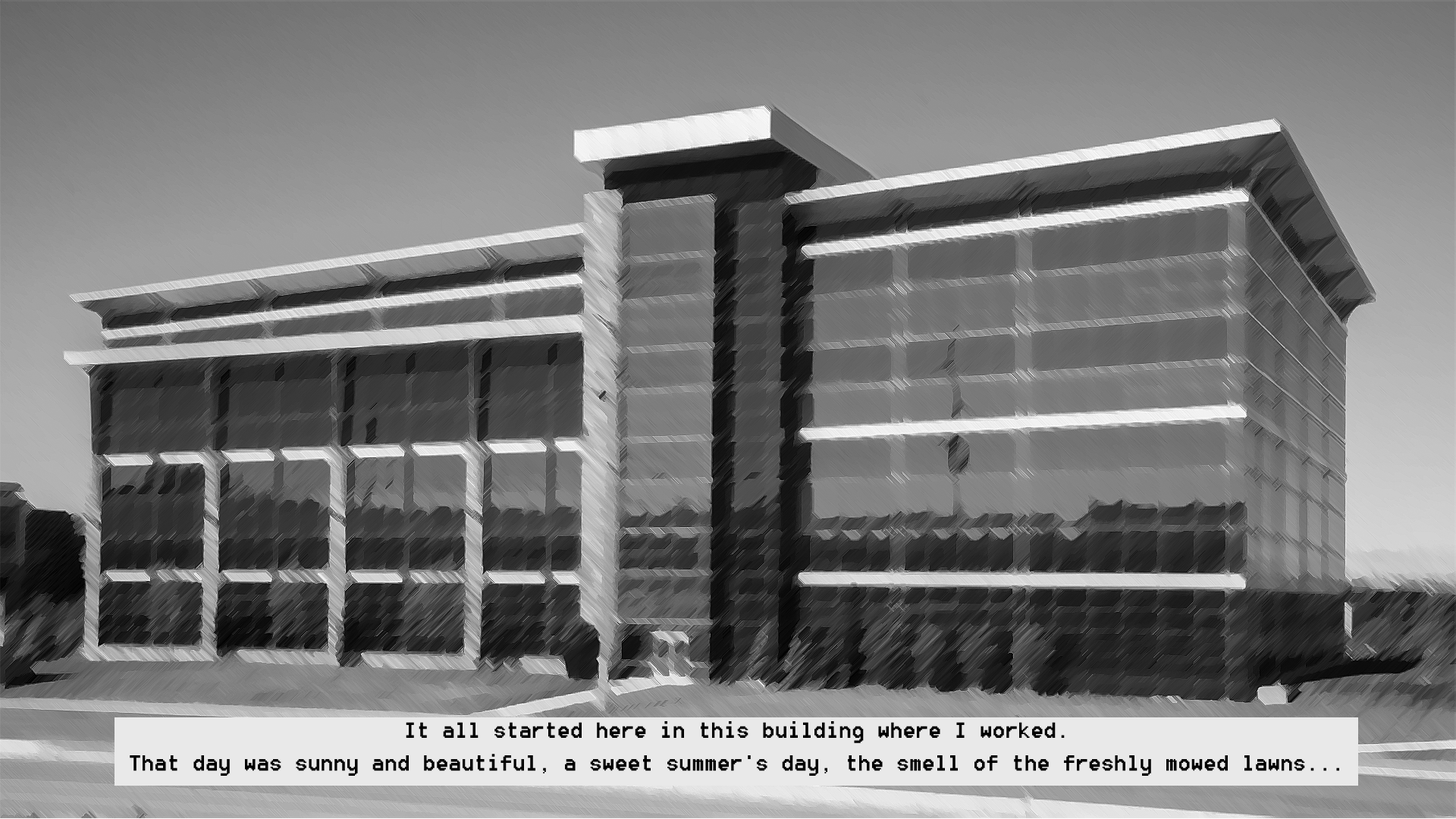
<style>
.page{position:relative;width:1456px;height:819px}
.page>*{position:absolute;margin:0}
.t1{font:27.3px "8514oem";color:#000000}
</style>
<div class="page">
<p class="t1" style="left:130px;top:721px;width:1209px;height:55px;text-align:center">It all started here in this building where I worked.<br>That day was sunny and beautiful, a sweet summer's day, the smell of the freshly mowed lawns...</p>
</div>
